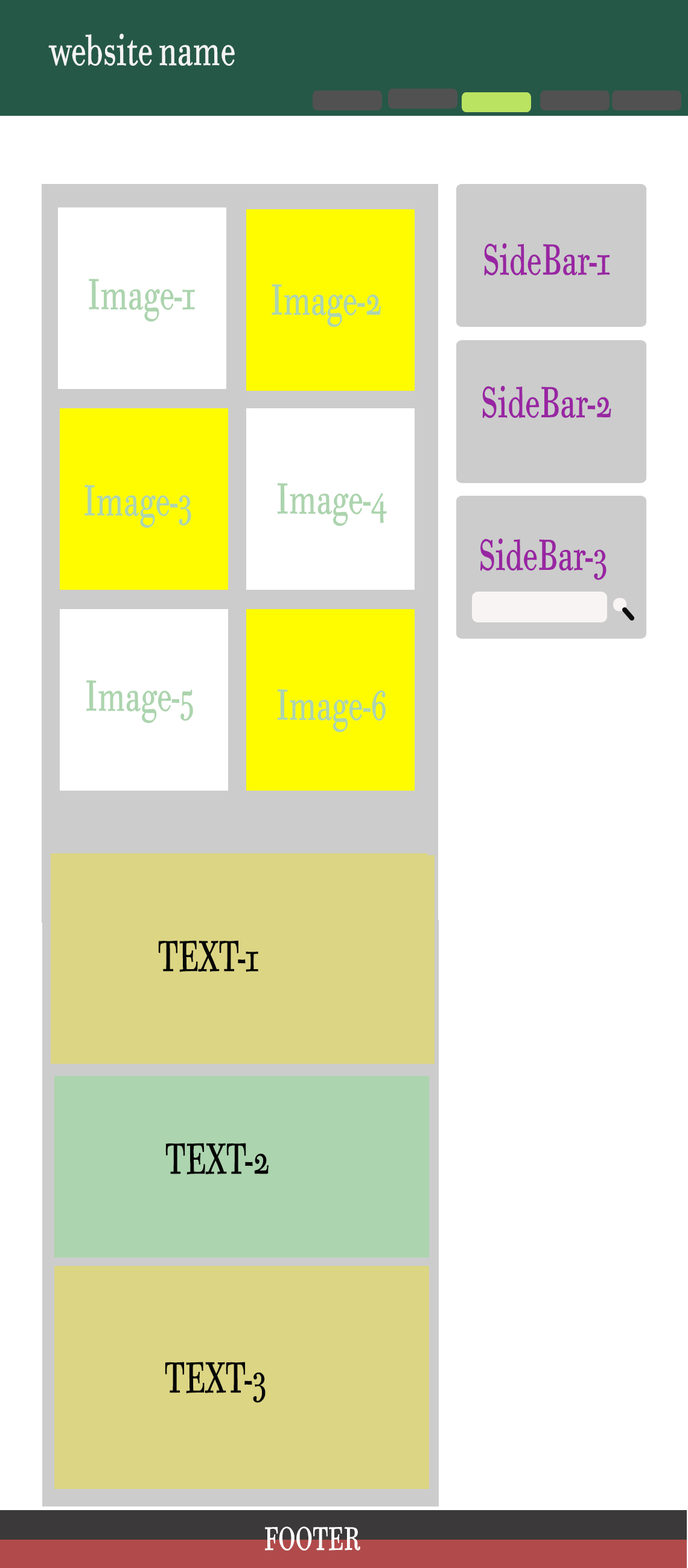
<style>
.page{position:relative;width:688px;height:1568px;background:#ffffff}
.page>*{position:absolute;margin:0}
.t1{font:43.4px "BodoniSixOSITCTTBook";color:#f3f3f3;scale:0.67 1}
.t2{font:43.4px "BodoniSixOSITCTTBook";color:#9826a2;scale:0.67 1}
.t3{font:43.4px "BodoniSixOSITCTTBook";color:#acd4ae;scale:0.67 1}
.t4{font:43.4px "BodoniSixOSITCTTBook";color:#050605;scale:0.67 1}
.t5{font:32.6px "BodoniSixOSITCTTBook";color:#ffffff;scale:0.67 1}
</style>
<div class="page">
<p class="t1" style="left:48px;top:33px;width:187px;height:33px">website name</p>
<p class="t2" style="left:484px;top:243px;width:125px;height:33px">SideBar-1</p>
<p class="t3" style="left:89px;top:279px;width:106px;height:43px">Image-1</p>
<p class="t3" style="left:271px;top:284px;width:110px;height:43px">Image-2</p>
<p class="t2" style="left:482px;top:385px;width:129px;height:33px">SideBar-2</p>
<p class="t3" style="left:84px;top:485px;width:107px;height:43px">Image-3</p>
<p class="t3" style="left:277px;top:483px;width:110px;height:43px">Image-4</p>
<p class="t2" style="left:480px;top:538px;width:126px;height:42px">SideBar-3</p>
<p class="t3" style="left:86px;top:680px;width:107px;height:43px">Image-5</p>
<p class="t3" style="left:277px;top:689px;width:108px;height:43px">Image-6</p>
<p class="t4" style="left:158px;top:940px;width:100px;height:32px">TEXT-1</p>
<p class="t4" style="left:165px;top:1143px;width:104px;height:32px">TEXT-2</p>
<p class="t4" style="left:165px;top:1362px;width:100px;height:41px">TEXT-3</p>
<p class="t5" style="left:265px;top:1526px;width:95px;height:25px">FOOTER</p>
</div>
